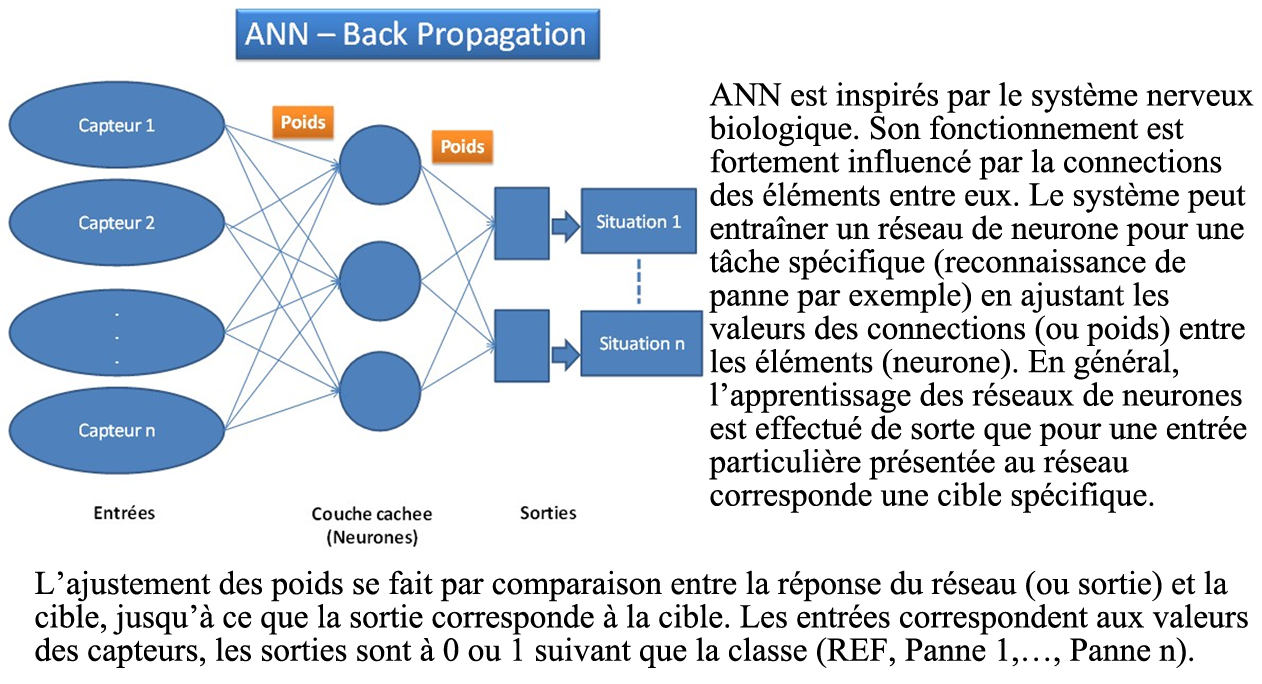
<style>
.page{position:relative;width:1262px;height:684px;background:#ffffff}
.page>*{position:absolute;margin:0}
.t1{font:33.3px/33.3px "TimesNewRomanPSMT";color:#000000}
</style>
<div class="page">
<p class="t1" style="left:709px;top:82px;width:545px;height:431px">ANN est inspirés par le système nerveux <br>biologique. Son fonctionnement est <br>fortement influencé par la connections <br>des éléments entre eux. Le système peut <br>entraîner un réseau de neurone pour une <br>tâche spécifique (reconnaissance de <br>panne par exemple) en ajustant les <br>valeurs des connections (ou poids) entre <br>les éléments (neurone). En général, <br>l’apprentissage des réseaux de neurones <br>est effectué de sorte que pour une entrée <br>particulière présentée au réseau <br>corresponde une cible spécifique.</p>
<p class="t1" style="left:35px;top:570px;width:1213px;height:98px">L’ajustement des poids se fait par comparaison entre la réponse du réseau (ou sortie) et la <br>cible, jusqu’à ce que la sortie corresponde à la cible. Les entrées correspondent aux valeurs <br>des capteurs, les sorties sont à 0 ou 1 suivant que la classe (REF, Panne 1,…, Panne n).</p>
</div>
